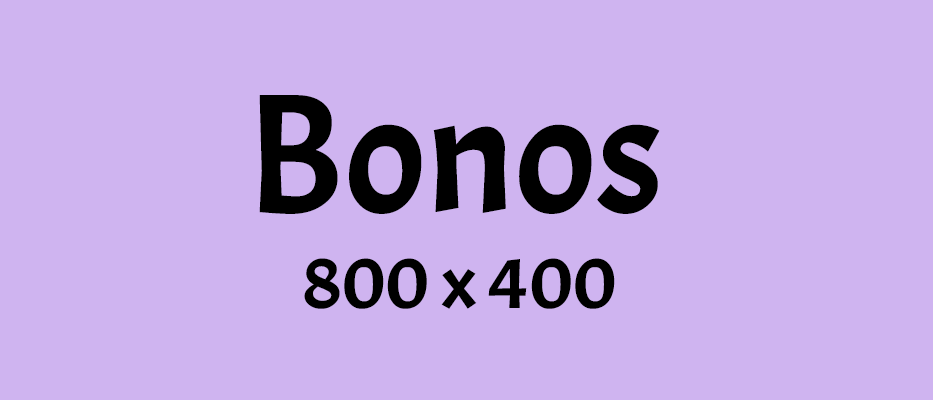
<style>
.page{position:relative;width:933px;height:400px;background:#cfb4f0}
.page>*{position:absolute;margin:0}
.t1{font:169.3px "Acme-Regular";color:#000000}
.t2{font:76.2px "Acme-Regular";color:#000000}
</style>
<div class="page">
<p class="t1" style="left:259px;top:95px;width:401px;height:119px">Bonos</p>
<p class="t2" style="left:304px;top:258px;width:311px;height:51px">800 x 400</p>
</div>
